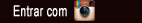
<style>
.page{position:relative;width:142px;height:23px;background:#140404}
.page>*{position:absolute;margin:0}
.t1{font:15px "ArialMT";color:#ffffff;font-weight:bold;scale:0.7 1}
</style>
<div class="page">
<p class="t1" style="left:13px;top:5px;width:54px;height:12px">Entrar com</p>
</div>
